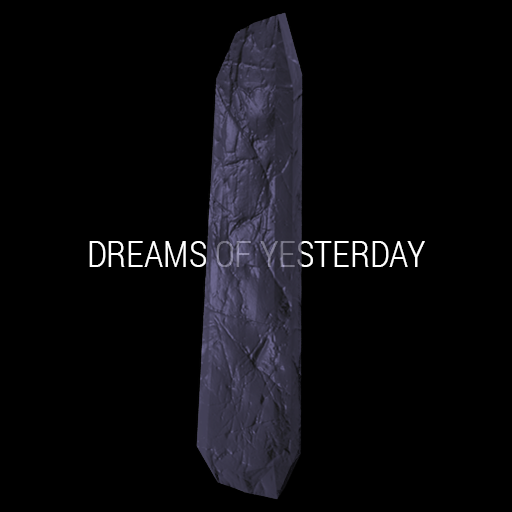
<style>
.page{position:relative;width:512px;height:512px;background:#000000}
.page>*{position:absolute;margin:0}
.t1{font:36px "RobotoCondensed-Light1100138";color:#ffffff}
</style>
<div class="page">
<p class="t1" style="left:89px;top:241px;width:336px;height:26px">DREAMS OF YESTERDAY</p>
</div>
